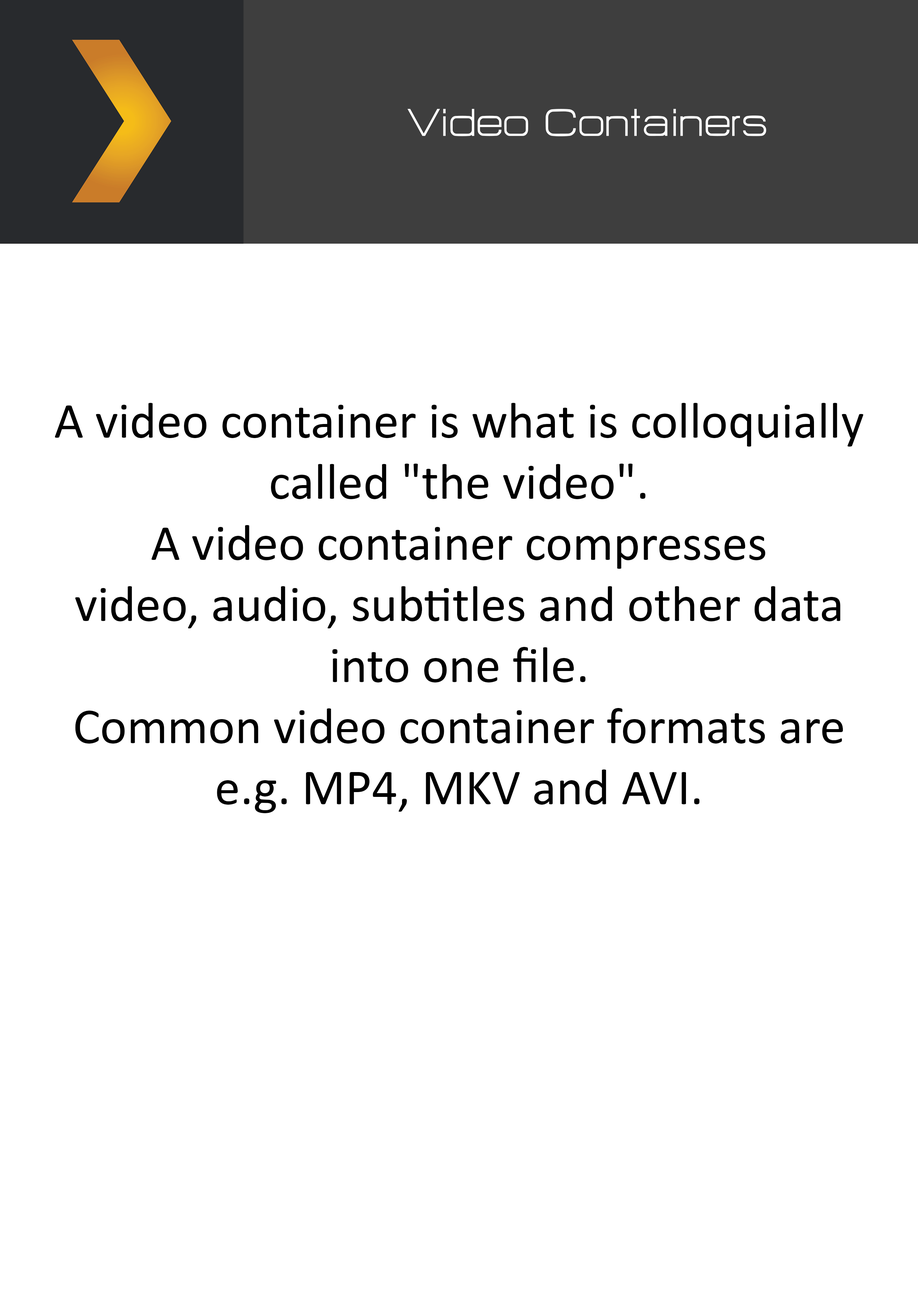
<style>
.page{position:relative;width:918px;height:1299px;background:#ffffff}
.page>*{position:absolute;margin:0}
.t1{font:47.8px "HURTMOLDPersonalUse-Regular";color:#ffffff}
.t2{font:50.9px "Calibri";color:#000000}
</style>
<div class="page">
<p class="t1" style="left:408px;top:109px;width:358px;height:27px">Video Containers</p>
<p class="t2" style="left:55px;top:403px;width:809px;height:410px;text-align:center">A video container is what is colloquially<br>called "the video".<br>A video container compresses<br>video, audio, subtitles and other data<br>into one file.<br>Common video container formats are<br>e.g. MP4, MKV and AVI.</p>
</div>
